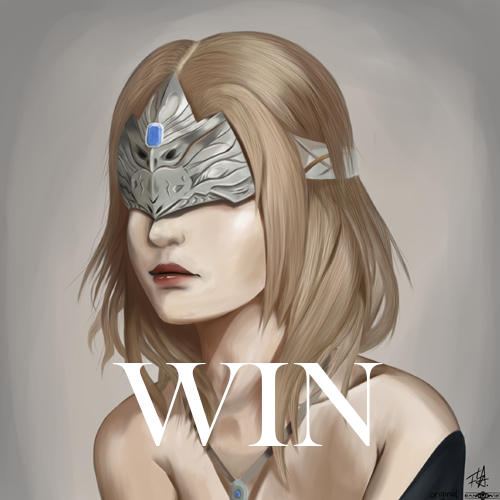
<style>
.page{position:relative;width:500px;height:500px}
.page>*{position:absolute;margin:0}
.t1{font:125px "BaskOldFace";color:#ffffff}
</style>
<div class="page">
<p class="t1" style="left:113px;top:363px;width:270px;height:83px">WIN</p>
</div>
